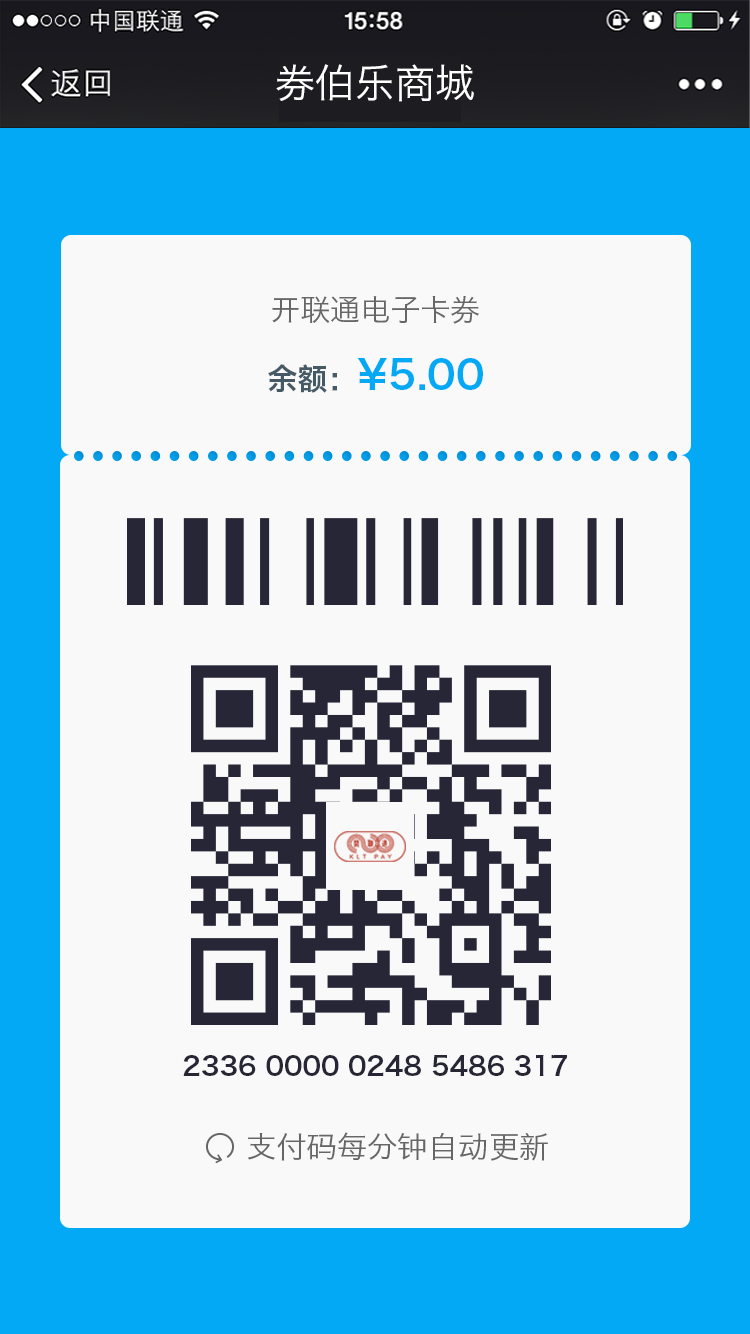
<style>
.page{position:relative;width:750px;height:1334px;background:#f9f9f9}
.page>*{position:absolute;margin:0}
.t1{font:40px "HiraginoSansGB-W3";color:#ffffff}
.t2{font:30px "HiraginoSansGB-W3";color:#666666}
.t3{font:40px "HiraginoSansGB-W6";color:#03a9f4}
.t4{font:30px "HiraginoSansGB-W6";color:#455a64}
.t5{font:26px "HiraginoSansGB-W6";color:#262635}
</style>
<div class="page">
<p class="t1" style="left:276px;top:64px;width:198px;height:38px">券伯乐商城</p>
<p class="t2" style="left:272px;top:296px;width:207px;height:28px">开联通电子卡券</p>
<p class="t3" style="left:268px;top:357px;width:215px;height:36px"><span class="t4">余额：</span>¥5.00</p>
<p class="t5" style="left:183px;top:1055px;width:384px;height:21px">2336 0000 0248 5486 317</p>
<p class="t2" style="left:248px;top:1132px;width:300px;height:29px">支付码每分钟自动更新</p>
</div>
